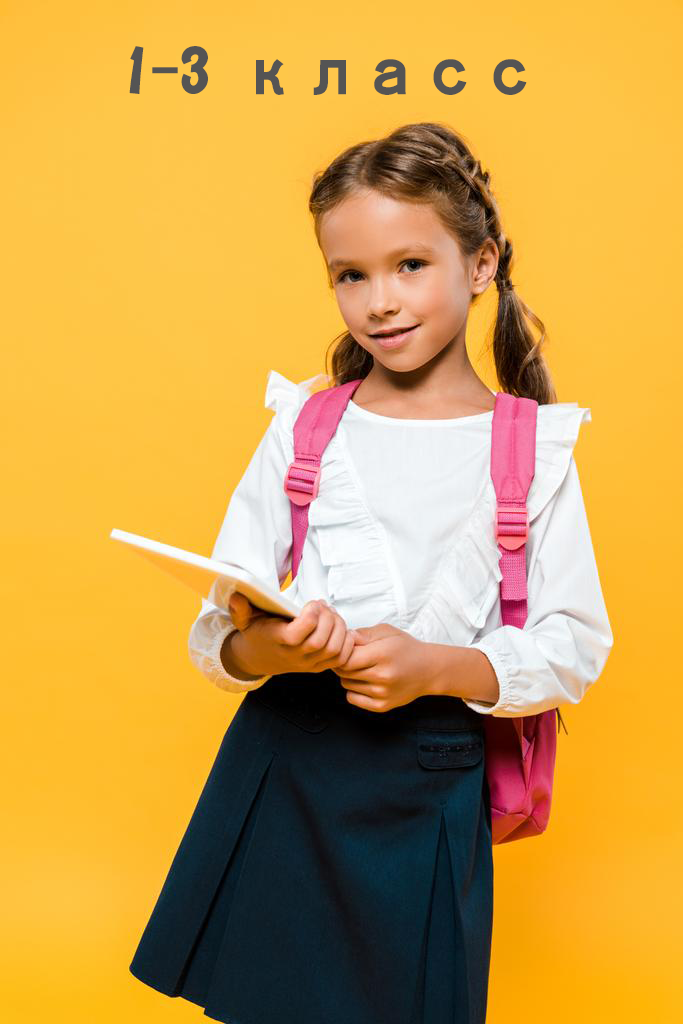
<style>
.page{position:relative;width:683px;height:1024px}
.page>*{position:absolute;margin:0}
.t1{font:60px "DFPOP1-W9-WIN-RKSJ-H";color:#545454}
</style>
<div class="page">
<p class="t1" style="left:129px;top:46px;width:398px;height:49px">1-3 класс</p>
</div>
